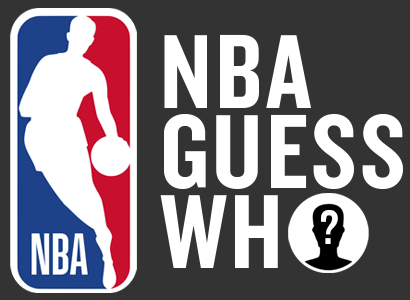
<style>
.page{position:relative;width:410px;height:300px;background:#333333}
.page>*{position:absolute;margin:0}
.t1{font:110px/80px "Knockout-HTF49-Liteweight";letter-spacing:0.03em;color:#ffffff}
.t2{font:50px "Knockout-HTF49-Liteweight";letter-spacing:0.03em;color:#ffffff}
</style>
<div class="page">
<p class="t1" style="left:160px;top:34px;width:243px;height:234px;text-align:justify">NBA <br>GUESS<br>WH</p>
<p class="t2" style="left:321px;top:210px;width:17px;height:34px">?</p>
</div>
